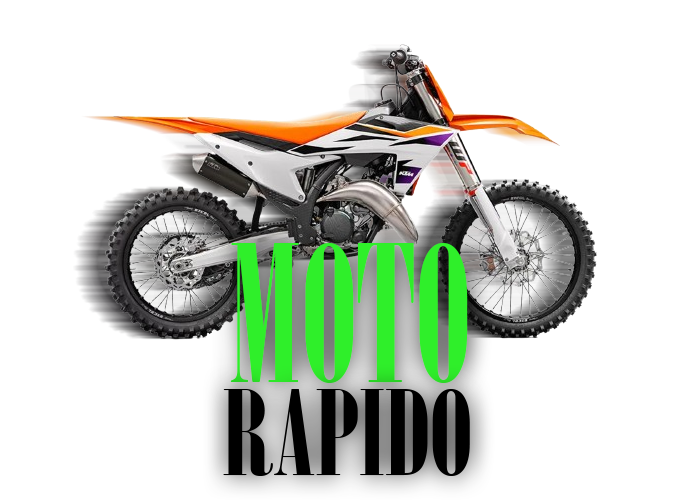
<style>
.page{position:relative;width:700px;height:500px;background:#ffffff}
.page>*{position:absolute;margin:0}
.t1{font:189.2px "Onyx";color:#2fef2a;scale:0.92 1}
.t2{font:117.2px "Onyx";color:#000000;scale:1.16 1}
</style>
<div class="page">
<p class="t1" style="left:230px;top:243px;width:238px;height:140px">MOTO</p>
<p class="t2" style="left:223px;top:389px;width:247px;height:87px">RAPIDO</p>
</div>
